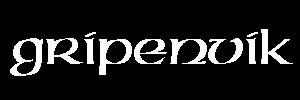
<style>
.page{position:relative;width:300px;height:100px;background:#000000}
.page>*{position:absolute;margin:0}
.t1{font:53.3px "Herald";color:#fcfbfb}
</style>
<div class="page">
<p class="t1" style="left:10px;top:29px;width:283px;height:47px">gripenvik</p>
</div>
